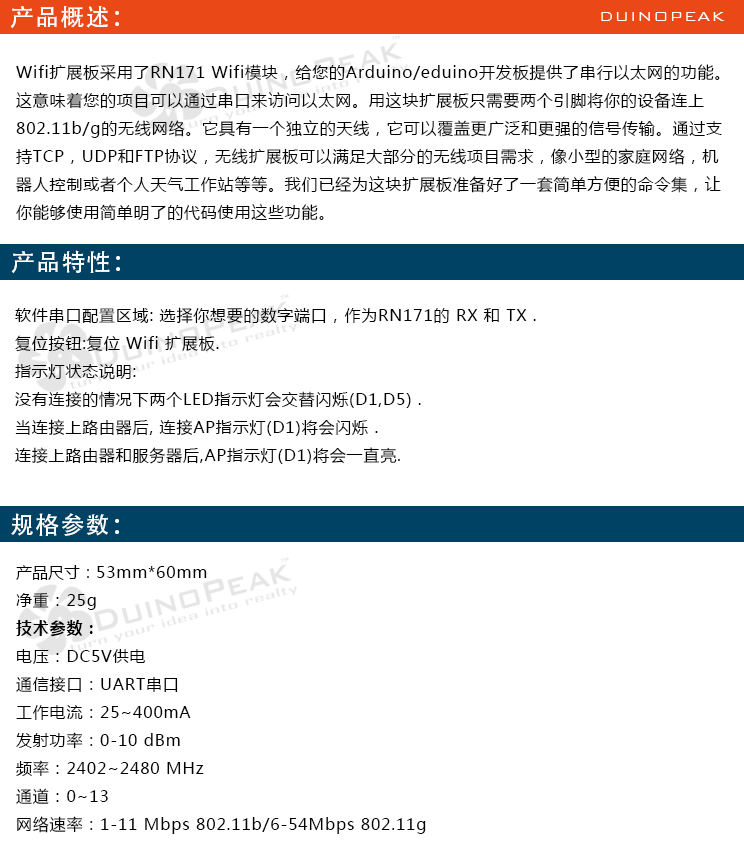
<style>
.page{position:relative;width:744px;height:850px;background:#ffffff}
.page>*{position:absolute;margin:0}
.t1{font:24px "AdobeHeitiStd-Regular";letter-spacing:0.05em;color:#ffffff}
.t2{font:18px "BankGothicBT-Light";letter-spacing:0.05em;color:#ffffff}
.t3{font:16px "MicrosoftYaHei";letter-spacing:0.05em;color:#000000}
.t4{font:16px "MicrosoftYaHei";color:#000000}
.t5{font:16px "MicrosoftYaHei-Bold";letter-spacing:0.05em;color:#000000}
</style>
<div class="page">
<p class="t1" style="left:10px;top:6px;width:109px;height:23px">产品概述：</p>
<p class="t2" style="left:601px;top:12px;width:124px;height:9px">DUINOPEAK</p>
<p class="t3" style="left:16px;top:64px;width:706px;height:157px">Wifi扩展板采用了RN171 Wifi模块，给您的Arduino/eduino开发板提供了串行以太网的功能。<br>这意味着您的项目可以通过串口来访问以太网。用这块扩展板只需要两个引脚将你的设备连上<br>802.11b/g的无线网络。它具有一个独立的天线，它可以覆盖更广泛和更强的信号传输。通过支<br>持TCP，UDP和FTP协议，无线扩展板可以满足大部分的无线项目需求，像小型的家庭网络，机<br>器人控制或者个人天气工作站等等。我们已经为这块扩展板准备好了一套简单方便的命令集，让<br>你能够使用简单明了的代码使用这些功能。</p>
<p class="t1" style="left:11px;top:250px;width:109px;height:24px">产品特性：</p>
<p class="t3" style="left:15px;top:307px;width:521px;height:157px">软件串口配置区域: 选择你想要的数字端口，作为RN171的 RX 和 TX .<br>复位按钮:复位 Wifi 扩展板.<br>指示灯状态说明:<br>没有连接的情况下两个LED指示灯会交替闪烁(D1,D5) .<br>当连接上路由器后, 连接AP指示灯(D1)将会闪烁 .<br>连接上路由器和服务器后,AP指示灯(D1)将会一直亮.</p>
<p class="t1" style="left:11px;top:513px;width:108px;height:23px">规格参数：</p>
<p class="t3" style="left:16px;top:565px;width:410px;height:269px"><span class="t4">产品尺寸：</span>53mm*60mm<br>净重：25g<br><span class="t5">技术参数：<br></span>电压：DC5V供电<br>通信接口：UART串口<br>工作电流：25~400mA<br>发射功率：0-10 dBm<br>频率：2402~2480 MHz<br>通道：0~13<br>网络速率：1-11 Mbps 802.11b/6-54Mbps 802.11g</p>
</div>
